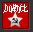
<style>
.page{position:relative;width:33px;height:32px;background:#c50000}
.page>*{position:absolute;margin:0}
.t1{font:10.4px "SimSun";letter-spacing:-0.25em;color:#ffffff}
</style>
<div class="page">
<p class="t1" style="left:3px;top:4px;width:25px;height:9px">加勒比</p>
</div>
